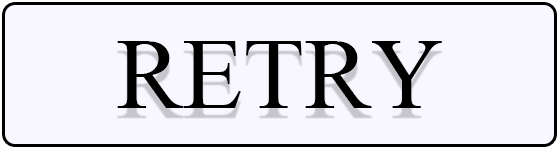
<style>
.page{position:relative;width:559px;height:149px;background:#f8f6fe}
.page>*{position:absolute;margin:0}
.t1{font:100px "TimesNewRomanPSMT";color:#000000}
</style>
<div class="page">
<p class="t1" style="left:117px;top:41px;width:325px;height:67px">RETRY</p>
</div>
